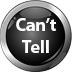
<style>
.page{position:relative;width:72px;height:72px;background:#ffffff}
.page>*{position:absolute;margin:0}
.t1{font:18px "MyriadPro-Bold";color:#ffffff}
</style>
<div class="page">
<p class="t1" style="left:16px;top:18px;width:40px;height:35px;text-align:center">Can’t<br>Tell</p>
</div>
